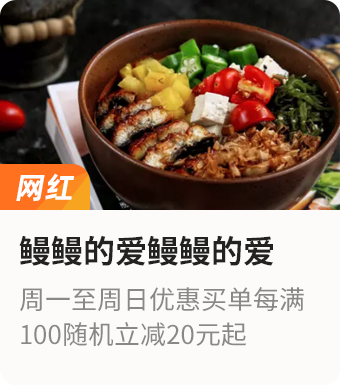
<style>
.page{position:relative;width:340px;height:385px;background:#fcfbf9}
.page>*{position:absolute;margin:0}
.t1{font:30px "AlibabaPuHuiTiB";color:#fffefe;font-style:italic}
.t2{font:32px "SourceHanSansCN-Bold";color:#222222}
.t3{font:26px/32px "SourceHanSansCN-Regular";color:#888888}
</style>
<div class="page">
<p class="t1" style="left:16px;top:173px;width:59px;height:29px">网红</p>
<p class="t2" style="left:19px;top:235px;width:254px;height:31px">鳗鳗的爱鳗鳗的爱</p>
<p class="t3" style="left:20px;top:287px;width:284px;height:59px">周一至周日优惠买单每满<br>100随机立减20元起</p>
</div>
